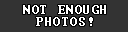
<style>
.page{position:relative;width:128px;height:32px;background:#333333}
.page>*{position:absolute;margin:0}
.t1{font:12px/12px "Terminal";letter-spacing:0.1em;color:#ffffff}
</style>
<div class="page">
<p class="t1" style="left:23px;top:5px;width:83px;height:21px;text-align:center">NOT ENOUGH<br>PHOTOS!</p>
</div>
